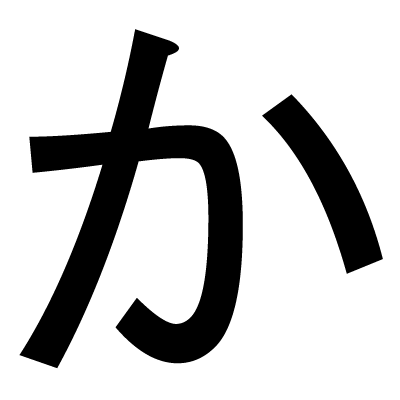
<style>
.page{position:relative;width:400px;height:400px;background:#ffffff}
.page>*{position:absolute;margin:0}
.t1{font:416.7px "MS-PGothic";color:#000000}
</style>
<div class="page">
<p class="t1" style="left:19px;top:29px;width:364px;height:340px">か</p>
</div>
